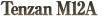
<style>
.page{position:relative;width:103px;height:18px;background:#ffffff}
.page>*{position:absolute;margin:0}
.t1{font:18px "RyuminPro-ExBold";letter-spacing:-0.08em;color:#4a3f32;font-weight:bold;scale:0.9 1}
</style>
<div class="page">
<p class="t1" style="left:0px;top:1px;width:98px;height:15px">Tenzan M12A</p>
</div>
